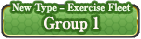
<style>
.page{position:relative;width:141px;height:39px}
.page>*{position:absolute;margin:0}
.t1{font:10px "RyuminPro-ExBold";letter-spacing:-0.04em;color:#fff6f1}
.t2{font:16px "RyuminPro-ExBold";letter-spacing:-0.04em;color:#fff6f1}
</style>
<div class="page">
<p class="t1" style="left:12px;top:3px;width:119px;height:10px">New Type – Exercise Fleet</p>
<p class="t2" style="left:44px;top:16px;width:55px;height:16px">Group 1</p>
</div>
